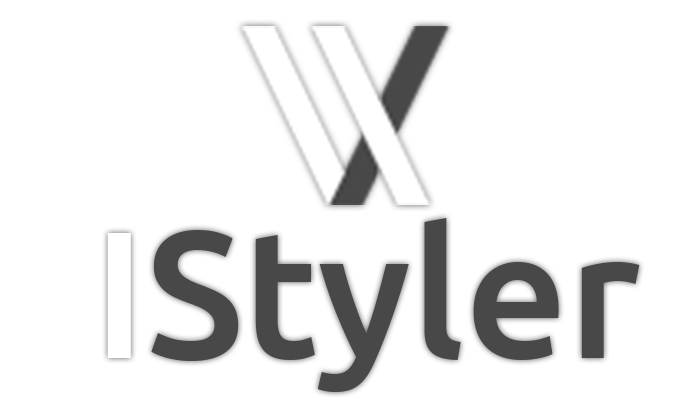
<style>
.page{position:relative;width:686px;height:410px;background:#ffffff}
.page>*{position:absolute;margin:0}
.t1{font:180px "Ubuntu-Medium";color:#484848}
.t2{font:180px "Ubuntu-Medium";color:#ffffff}
</style>
<div class="page">
<p class="t1" style="left:107px;top:218px;width:533px;height:174px"><span class="t2">I</span>Styler</p>
</div>
